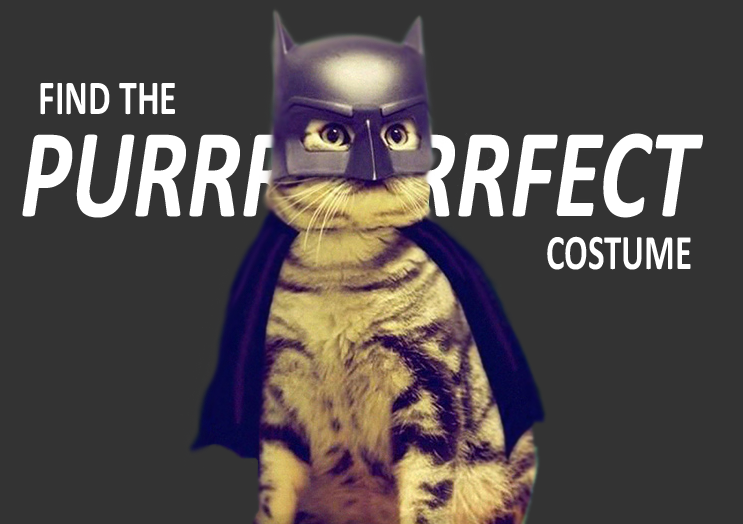
<style>
.page{position:relative;width:743px;height:524px;background:#333333}
.page>*{position:absolute;margin:0}
.t1{font:49.1px "Calibri-Bold";color:#ffffff;scale:0.73 1}
.t2{font:128.3px "Calibri-BoldItalic";color:#ffffff;scale:0.75 1}
.t3{font:49.9px "Calibri-Bold";color:#ffffff;scale:0.7 1}
</style>
<div class="page">
<p class="t1" style="left:40px;top:83px;width:135px;height:32px">FIND THE</p>
<p class="t2" style="left:22px;top:133px;width:681px;height:85px">PURRRRRRRFECT</p>
<p class="t3" style="left:547px;top:236px;width:144px;height:34px">COSTUME</p>
</div>
